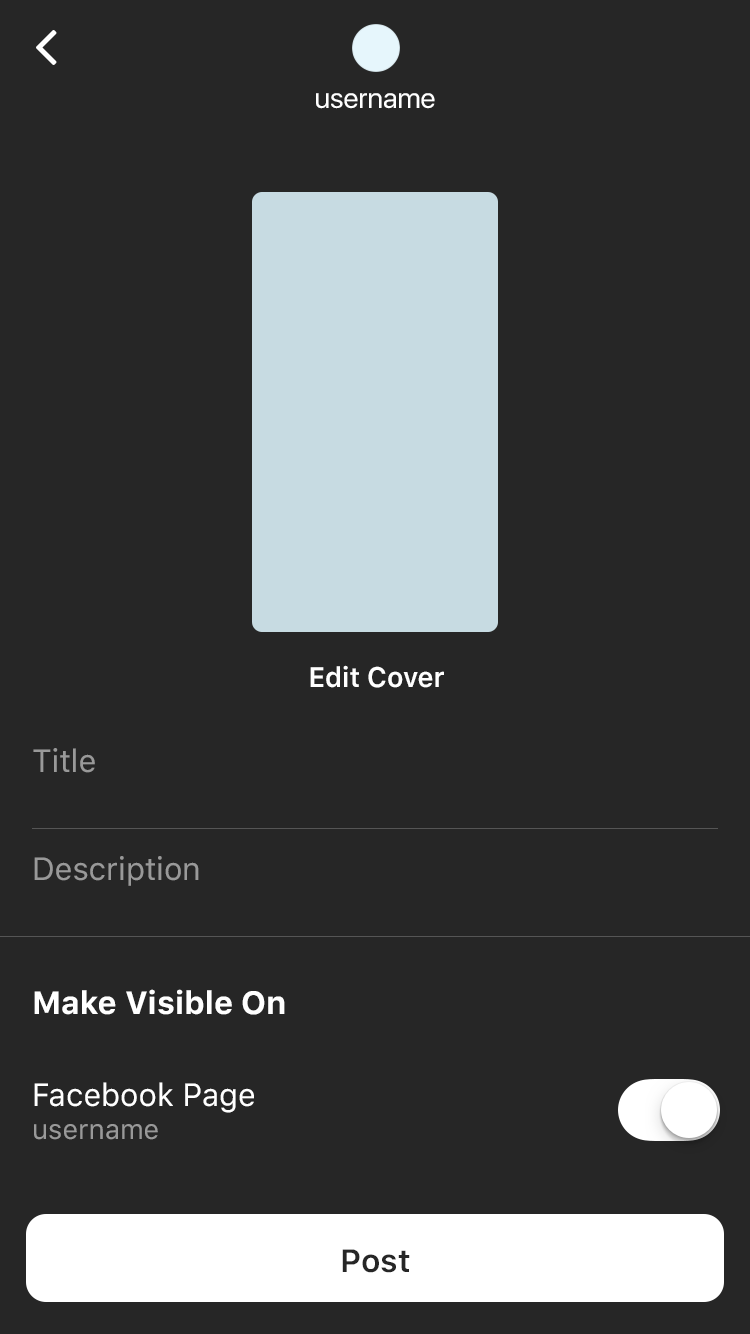
<style>
.page{position:relative;width:750px;height:1334px;background:#262626}
.page>*{position:absolute;margin:0}
.t1{font:28px "SFUIDisplay-Regular";color:#ffffff}
.t2{font:28px "SFUIText-Semibold";color:#ffffff;scale:0.96 1}
.t3{font:32px "SFUIText-Regular";color:#999999}
.t4{font:32px "SFUIText-Bold";color:#ffffff}
.t5{font:32px "SFUIText-Regular";color:#ffffff}
.t6{font:28px "SFUIText-Regular";color:#999999}
.t7{font:32px "SFUIText-Semibold";color:#262626}
</style>
<div class="page">
<p class="t1" style="left:316px;top:93px;width:119px;height:16px">username</p>
<p class="t2" style="left:310px;top:665px;width:134px;height:23px">Edit Cover</p>
<p class="t3" style="left:33px;top:748px;width:62px;height:25px">Title</p>
<p class="t3" style="left:34px;top:856px;width:165px;height:30px">Description</p>
<p class="t4" style="left:34px;top:989px;width:251px;height:26px">Make Visible On</p>
<p class="t5" style="left:34px;top:1082px;width:220px;height:31px">Facebook Page</p>
<p class="t6" style="left:34px;top:1124px;width:124px;height:16px">username</p>
<p class="t7" style="left:342px;top:1249px;width:68px;height:24px">Post</p>
</div>
